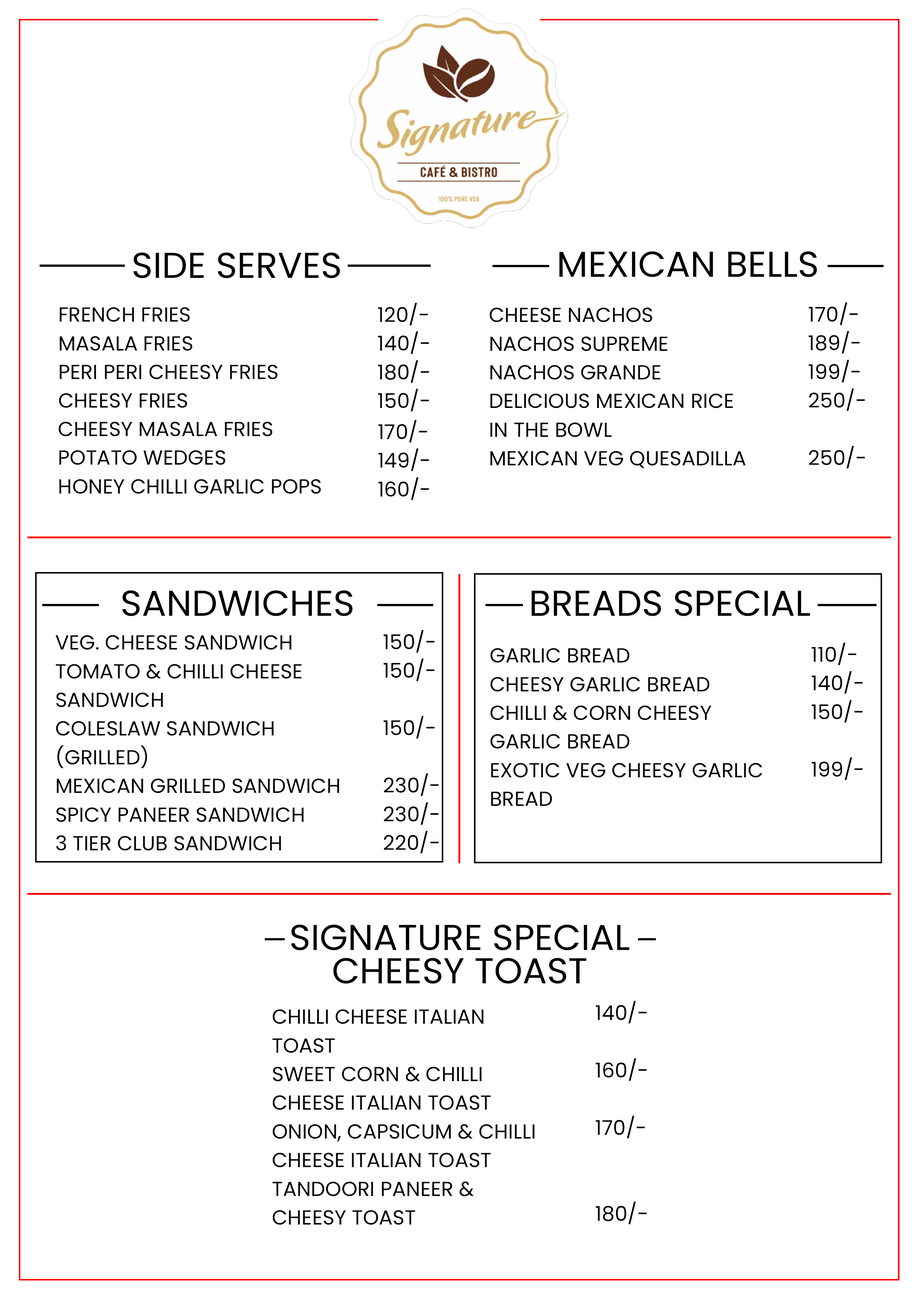
<style>
.page{position:relative;width:918px;height:1299px;background:#ffffff}
.page>*{position:absolute;margin:0}
.t1{font:35.9px "Poppins-Regular";color:#000000;text-transform:uppercase}
.t2{font:20.4px/28.7px "Poppins-Regular";color:#000000}
.t3{font:35.9px/33.3px "Poppins-Regular";color:#000000;text-transform:uppercase}
</style>
<div class="page">
<p class="t1" style="left:133px;top:252px;width:207px;height:26px">SIDE SERVES</p>
<p class="t1" style="left:559px;top:251px;width:258px;height:26px">MEXICAN BELLS</p>
<p class="t2" style="left:378px;top:303px;width:51px;height:109px">120/-<br>140/-<br>180/-<br>150/-</p>
<p class="t2" style="left:809px;top:302px;width:56px;height:167px">170/-<br>189/-<br>199/-<br>250/-<br><br>250/-</p>
<p class="t2" style="left:59px;top:307px;width:219px;height:101px">FRENCH FRIES<br>MASALA FRIES<br>PERI PERI CHEESY FRIES<br>CHEESY FRIES</p>
<p class="t2" style="left:490px;top:307px;width:256px;height:161px">CHEESE NACHOS<br>NACHOS SUPREME<br>NACHOS GRANDE<br>DELICIOUS MEXICAN RICE<br>IN THE BOWL<br>MEXICAN VEG QUESADILLA</p>
<p class="t2" style="left:59px;top:422px;width:262px;height:72px">CHEESY MASALA FRIES<br>POTATO WEDGES<br>HONEY CHILLI GARLIC POPS</p>
<p class="t2" style="left:379px;top:420px;width:50px;height:80px">170/-<br>149/-<br>160/-</p>
<p class="t1" style="left:122px;top:590px;width:231px;height:26px">SANDWICHES</p>
<p class="t1" style="left:532px;top:590px;width:278px;height:26px">BREADS SPECIAL</p>
<p class="t2" style="left:384px;top:630px;width:55px;height:223px">150/-<br>150/-<br><br>150/-<br><br>230/-<br>230/-<br>220/-</p>
<p class="t2" style="left:56px;top:635px;width:283px;height:215px">VEG. CHEESE SANDWICH<br>TOMATO &amp; CHILLI CHEESE<br>SANDWICH<br>COLESLAW SANDWICH<br>(GRILLED)<br>MEXICAN GRILLED SANDWICH<br>SPICY PANEER SANDWICH<br>3 TIER CLUB SANDWICH</p>
<p class="t2" style="left:490px;top:648px;width:273px;height:158px">GARLIC BREAD<br>CHEESY GARLIC BREAD<br>CHILLI &amp; CORN CHEESY<br>GARLIC BREAD<br>EXOTIC VEG CHEESY GARLIC<br>BREAD</p>
<p class="t2" style="left:812px;top:642px;width:51px;height:138px">110/-<br>140/-<br>150/-<br><br>199/-</p>
<p class="t3" style="left:291px;top:924px;width:339px;height:59px;text-align:center">SIGNATURE SPECIAL<br>CHEESY TOAST</p>
<p class="t2" style="left:596px;top:1000px;width:51px;height:224px">140/-<br><br>160/-<br><br>170/-<br><br><br>180/-</p>
<p class="t2" style="left:272px;top:1009px;width:263px;height:216px">CHILLI CHEESE ITALIAN<br>TOAST<br>SWEET CORN &amp; CHILLI<br>CHEESE ITALIAN TOAST<br>ONION, CAPSICUM &amp; CHILLI<br>CHEESE ITALIAN TOAST<br>TANDOORI PANEER &amp;<br>CHEESY TOAST</p>
</div>
